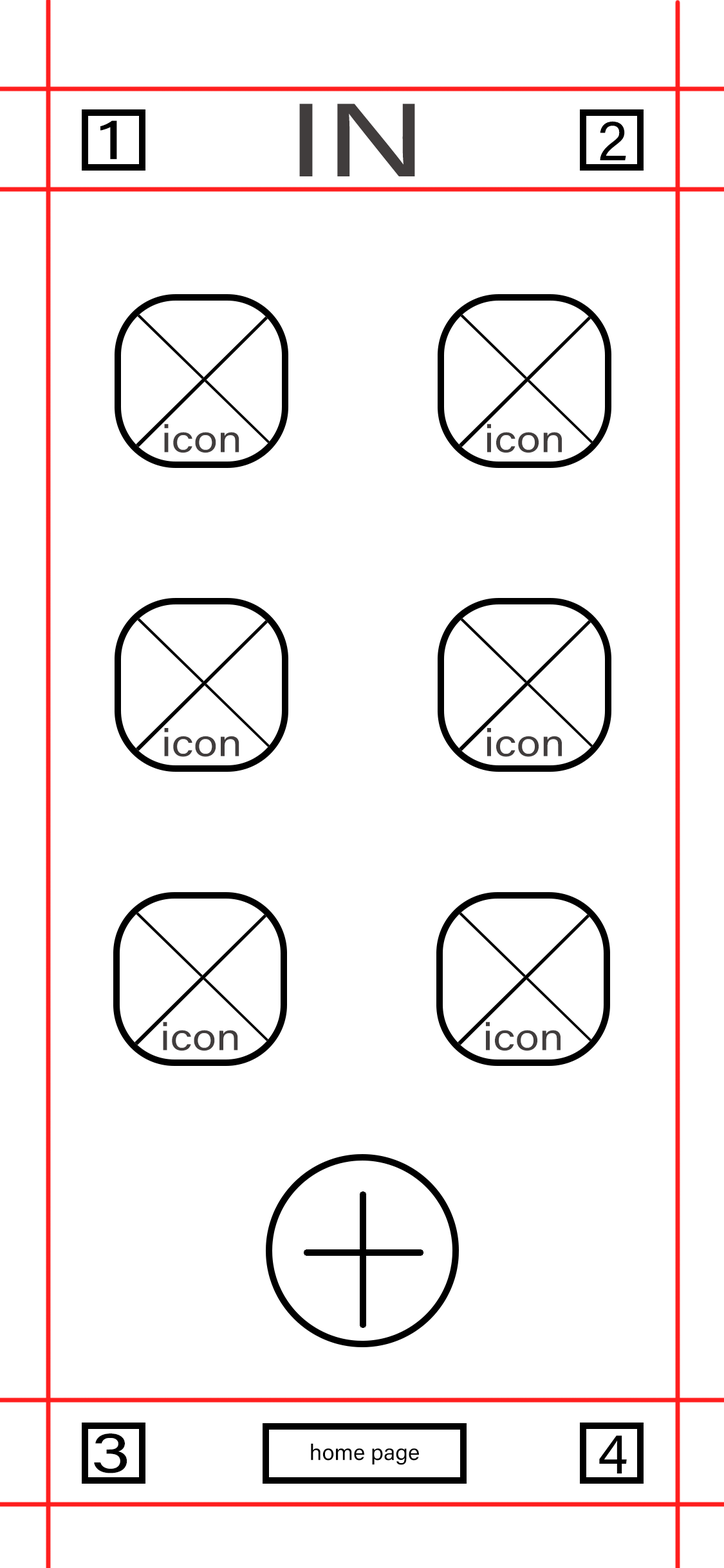
<style>
.page{position:relative;width:724px;height:1568px;background:#ffffff}
.page>*{position:absolute;margin:0}
.t1{font:104.1px "AcuminConcept-Regular";color:#413d3d;scale:1.32 1}
.t2{font:57.8px "AcuminConcept-Regular";color:#000000;scale:1.24 1}
.t3{font:57.8px "AcuminConcept-Regular";color:#000000}
.t4{font:38.3px "AcuminConcept-Regular";color:#413d3d;scale:1.14 1}
.t5{font:22.4px "AcuminConcept-Regular";color:#000000}
</style>
<div class="page">
<p class="t1" style="left:299px;top:104px;width:116px;height:72px">IN</p>
<p class="t2" style="left:100px;top:120px;width:17px;height:40px">1</p>
<p class="t3" style="left:600px;top:121px;width:26px;height:39px">2</p>
<p class="t4" style="left:164px;top:424px;width:75px;height:29px">icon</p>
<p class="t4" style="left:487px;top:424px;width:75px;height:29px">icon</p>
<p class="t4" style="left:164px;top:728px;width:75px;height:29px">icon</p>
<p class="t4" style="left:487px;top:728px;width:75px;height:29px">icon</p>
<p class="t4" style="left:163px;top:1022px;width:75px;height:29px">icon</p>
<p class="t4" style="left:486px;top:1022px;width:75px;height:29px">icon</p>
<p class="t2" style="left:94px;top:1433px;width:33px;height:40px">3</p>
<p class="t5" style="left:311px;top:1443px;width:108px;height:22px">home page</p>
<p class="t3" style="left:599px;top:1435px;width:28px;height:39px">4</p>
</div>
